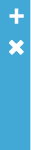
<style>
.page{position:relative;width:31px;height:150px;background:#42a8d6}
.page>*{position:absolute;margin:0}
.t1{font:36px "HelveticaCYBold";letter-spacing:-0.025em;color:#ffffff}
</style>
<div class="page">
<p class="t1" style="left:9px;top:8px;width:15px;height:16px">+</p>
</div>
